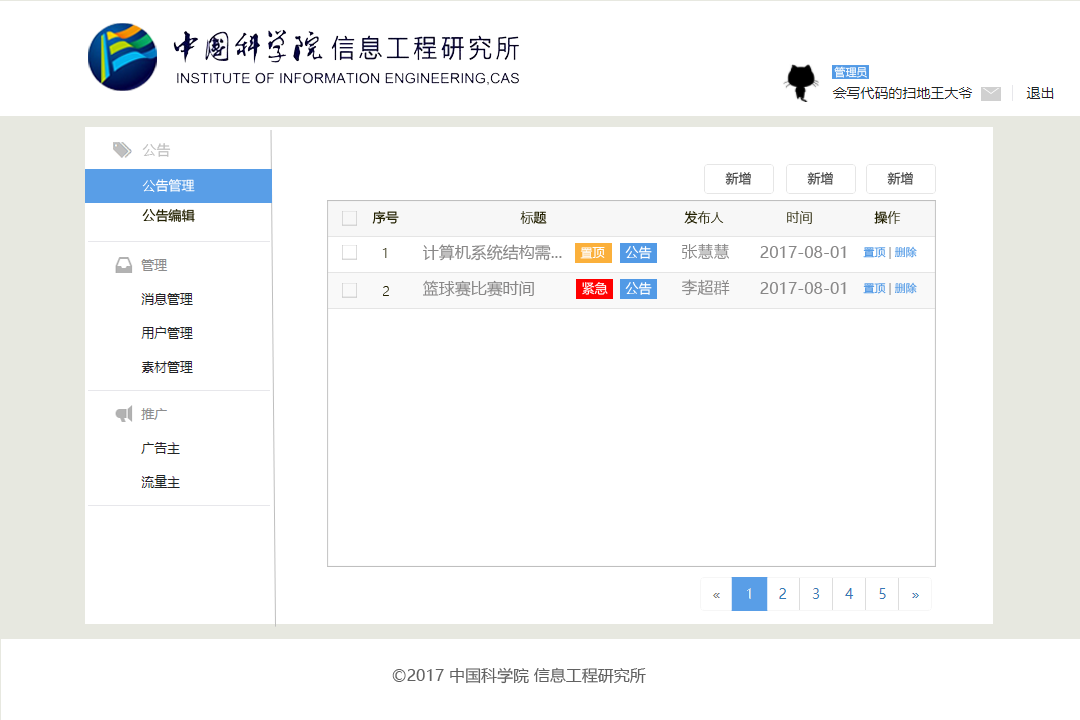
<style>
.page{position:relative;width:1080px;height:720px;background:#ffffff}
.page>*{position:absolute;margin:0}
.t1{font:11px "MicrosoftYaHei";color:#ffffff}
.t2{font:14px "MicrosoftYaHei";color:#bfbfbf}
.t3{font:13px "MicrosoftYaHeiLight";color:#484848}
.t4{font:13px "MicrosoftYaHeiLight";color:#ffffff}
.t5{font:13px "MicrosoftYaHei";color:#222000}
.t6{font:13px "MicrosoftYaHeiLight";color:#222000}
.t7{font:13px "MicrosoftYaHeiLight"}
.t8{font:16px "MicrosoftYaHei";color:#888787}
.t9{font:13px "MicrosoftYaHei";color:#ffffff}
.t10{font:16px "MicrosoftYaHeiLight";color:#888787}
.t11{font:11px "MicrosoftYaHeiLight";color:#599ee7}
.t12{font:11px "MicrosoftYaHeiLight";color:#888787}
.t13{font:12px "MicrosoftYaHei";color:#ffffff}
.t14{font:16px "MicrosoftYaHei";color:#616161}
</style>
<div class="page">
<p class="t1" style="left:834px;top:66px;width:33px;height:12px">管理员</p>
<p class="t2" style="left:142px;top:143px;width:29px;height:14px">公告</p>
<p class="t3" style="left:725px;top:172px;width:26px;height:13px">新增</p>
<p class="t3" style="left:807px;top:172px;width:26px;height:13px">新增</p>
<p class="t3" style="left:887px;top:172px;width:26px;height:13px">新增</p>
<p class="t4" style="left:142px;top:179px;width:53px;height:13px">公告管理</p>
<p class="t5" style="left:142px;top:209px;width:53px;height:13px">公告编辑</p>
<p class="t6" style="left:372px;top:211px;width:27px;height:13px">序号</p>
<p class="t6" style="left:520px;top:211px;width:27px;height:13px">标题</p>
<p class="t6" style="left:684px;top:211px;width:40px;height:13px">发布人</p>
<p class="t7" style="left:787px;top:211px;width:25px;height:13px">时间</p>
<p class="t6" style="left:874px;top:211px;width:27px;height:13px">操作</p>
<p class="t8" style="left:423px;top:244px;width:139px;height:17px">计算机系统结构需...</p>
<p class="t9" style="left:625px;top:246px;width:27px;height:13px">公告</p>
<p class="t10" style="left:682px;top:243px;width:47px;height:16px">张慧慧</p>
<p class="t8" style="left:760px;top:246px;width:86px;height:12px">2017-08-01</p>
<p class="t11" style="left:863px;top:246px;width:54px;height:13px">置顶<span class="t12"> | </span>删除</p>
<p class="t7" style="left:382px;top:248px;width:5px;height:10px">1</p>
<p class="t13" style="left:580px;top:247px;width:25px;height:12px">置顶</p>
<p class="t8" style="left:423px;top:280px;width:111px;height:17px">篮球赛比赛时间</p>
<p class="t10" style="left:682px;top:279px;width:48px;height:16px">李超群</p>
<p class="t6" style="left:383px;top:286px;width:6px;height:10px">2</p>
<p class="t9" style="left:582px;top:282px;width:26px;height:13px">紧急</p>
<p class="t9" style="left:625px;top:282px;width:27px;height:13px">公告</p>
<p class="t8" style="left:760px;top:282px;width:86px;height:12px">2017-08-01</p>
<p class="t11" style="left:863px;top:282px;width:54px;height:13px">置顶<span class="t12"> | </span>删除</p>
<p class="t14" style="left:392px;top:667px;width:254px;height:17px">©2017 中国科学院 信息工程研究所</p>
</div>
